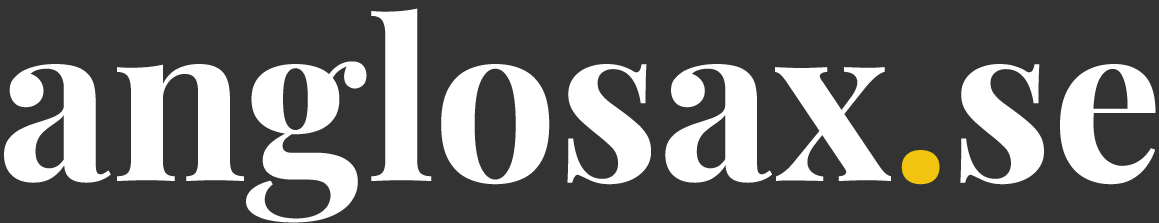
<style>
.page{position:relative;width:1159px;height:223px;background:#333333}
.page>*{position:absolute;margin:0}
.t1{font:220px "PlayfairDisplayRoman-Bold";color:#ffffff}
.t2{font:220px "PlayfairDisplayRoman-Bold";color:#f1c40f}
</style>
<div class="page">
<p class="t1" style="left:4px;top:8px;width:1152px;height:215px">anglosax<span class="t2">.</span>se</p>
</div>
